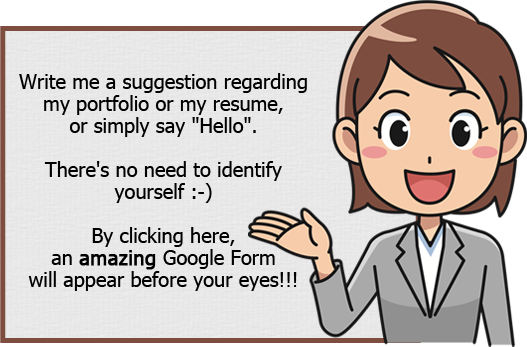
<style>
.page{position:relative;width:527px;height:347px}
.page>*{position:absolute;margin:0}
.t1{font:20px/22px "Tahoma";color:#000000}
.t2{font:20px/22px "Tahoma";color:#000000;font-weight:bold}
</style>
<div class="page">
<p class="t1" style="left:19px;top:73px;width:288px;height:218px;text-align:center">Write me a suggestion regarding<br>my portfolio or my resume,<br>or simply say "Hello".<br><br>There's no need to identify<br>yourself :-)<br><br>By clicking here,<br>an <span class="t2">amazing </span>Google Form<br>will appear before your eyes!!!</p>
</div>
